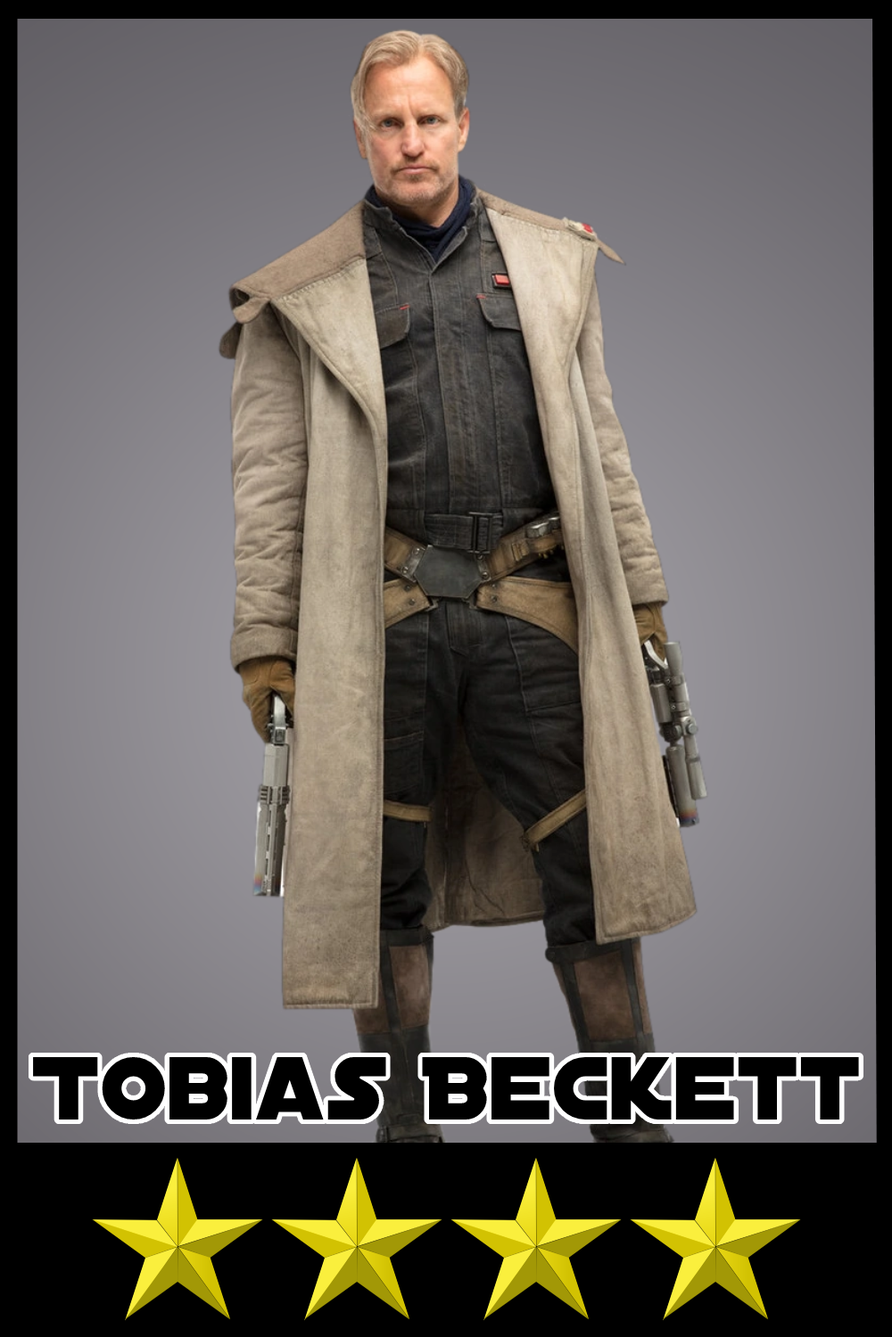
<style>
.page{position:relative;width:892px;height:1337px}
.page>*{position:absolute;margin:0}
.t1{font:96.1px "DistantGalaxy";color:#000000}
</style>
<div class="page">
<p class="t1" style="left:33px;top:1057px;width:826px;height:63px">Tobias Beckett</p>
</div>
